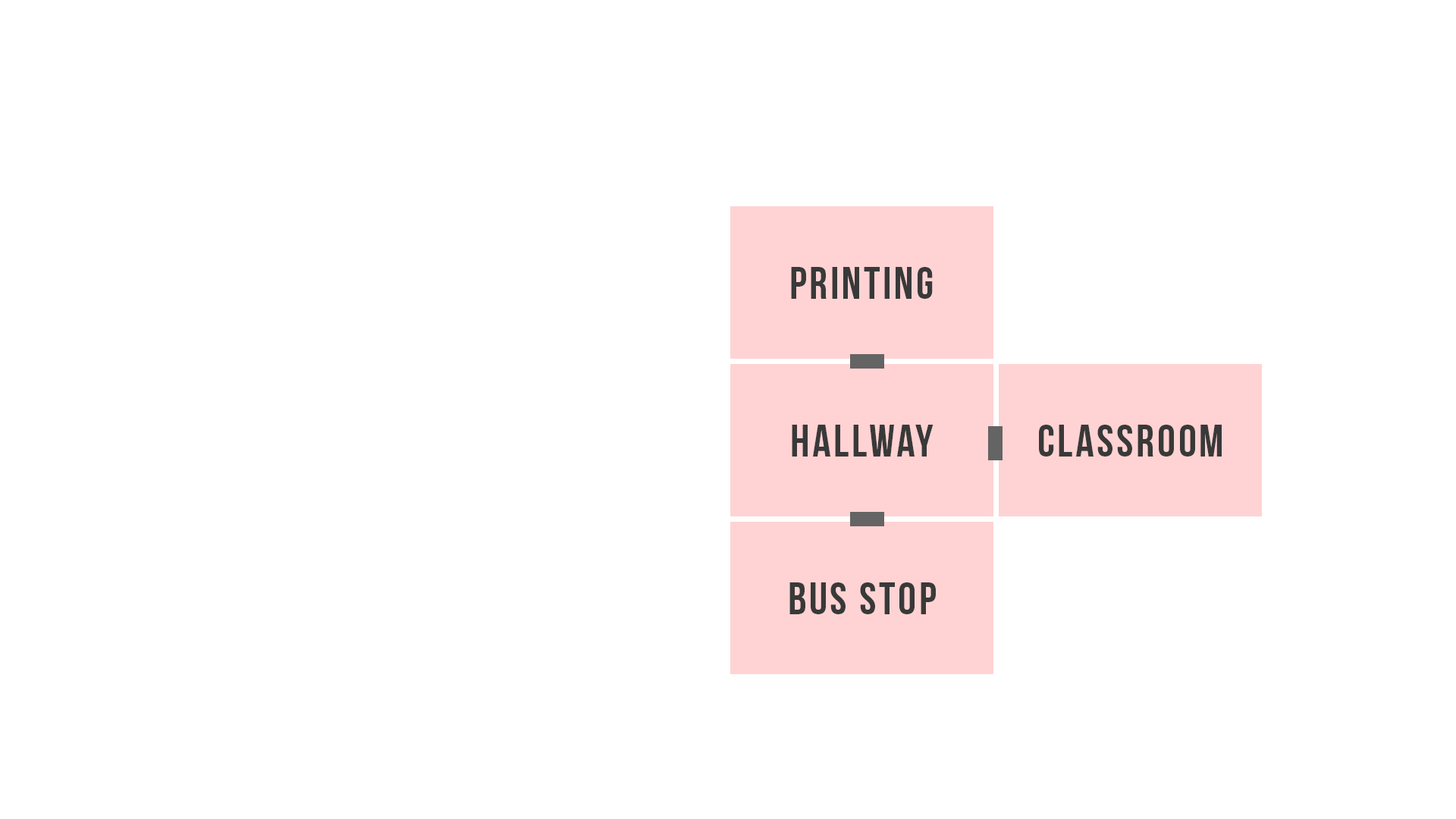
<style>
.page{position:relative;width:1456px;height:819px;background:#ffffff}
.page>*{position:absolute;margin:0}
.t1{font:45.5px "BebasNeue";letter-spacing:0.06em;color:#393939}
</style>
<div class="page">
<p class="t1" style="left:791px;top:267px;width:142px;height:32px">Printing</p>
<p class="t1" style="left:792px;top:425px;width:141px;height:32px">Hallway</p>
<p class="t1" style="left:1039px;top:425px;width:183px;height:32px">Classroom</p>
<p class="t1" style="left:789px;top:582px;width:147px;height:32px">Bus stop</p>
</div>
